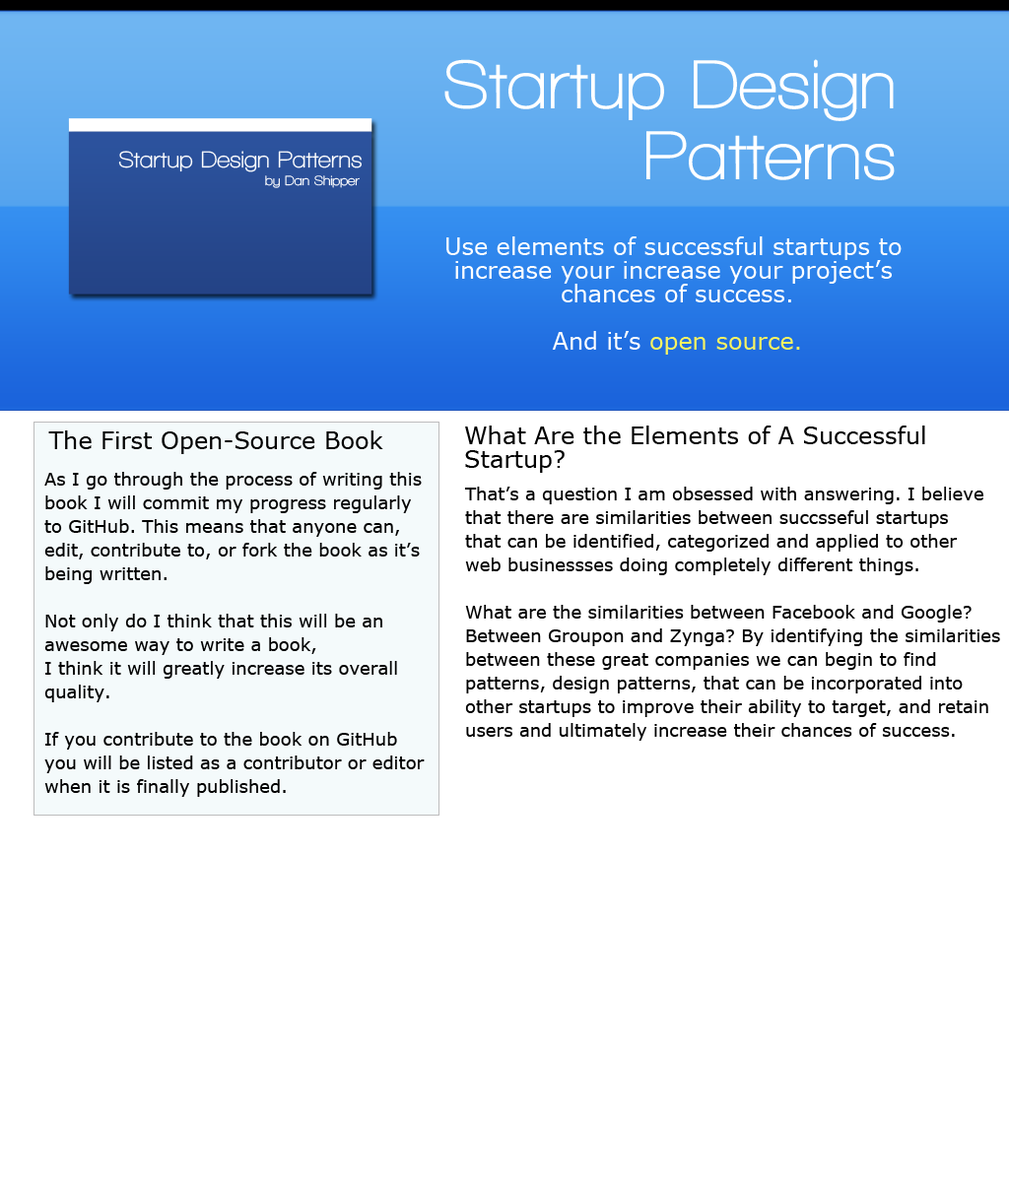
<style>
.page{position:relative;width:1009px;height:1182px;background:#ffffff}
.page>*{position:absolute;margin:0}
.t1{font:70.9px/23.6px "WalkwayBold";color:#ffffff}
.t2{font:23.6px "WalkwayBold";color:#ffffff}
.t3{font:13.8px "WalkwayBold";color:#ffffff}
.t4{font:23.6px/23.6px "Verdana";color:#ffffff}
.t5{font:23.6px/23.6px "Verdana";color:#f8f362}
.t6{font:23.6px/23.6px "Verdana";color:#000000}
.t7{font:23.6px "Verdana";color:#000000}
.t8{font:17.7px/23.6px "Verdana";color:#000000}
</style>
<div class="page">
<p class="t1" style="left:444px;top:59px;width:450px;height:121px;text-align:right">Startup Design<br><br><br>Patterns</p>
<p class="t2" style="left:118px;top:151px;width:244px;height:21px">Startup Design Patterns</p>
<p class="t3" style="left:265px;top:175px;width:95px;height:13px">by Dan Shipper</p>
<p class="t4" style="left:446px;top:236px;width:455px;height:119px;text-align:center">Use elements of successful startups to <br>increase your increase your project’s <br>chances of success.<br><br>And it’s <span class="t5">open source.</span></p>
<p class="t6" style="left:465px;top:426px;width:460px;height:47px">What Are the Elements of A Successful<br>Startup?</p>
<p class="t7" style="left:48px;top:430px;width:335px;height:24px">The First Open-Source Book</p>
<p class="t8" style="left:44px;top:472px;width:381px;height:325px">As I go through the process of writing this<br>book I will commit my progress regularly<br>to GitHub. This means that anyone can,<br>edit, contribute to, or fork the book as it’s<br>being written.<br><br>Not only do I think that this will be an <br>awesome way to write a book,<br>I think it will greatly increase its overall<br>quality.<br><br>If you contribute to the book on GitHub <br>you will be listed as a contributor or editor<br>when it is finally published.</p>
<p class="t8" style="left:464px;top:487px;width:536px;height:254px">That’s a question I am obsessed with answering. I believe<br>that there are similarities between succsseful startups<br>that can be identified, categorized and applied to other<br>web businessses doing completely different things.<br><br>What are the similarities between Facebook and Google?<br>Between Groupon and Zynga? By identifying the similarities<br>between these great companies we can begin to find<br>patterns, design patterns, that can be incorporated into<br>other startups to improve their ability to target, and retain<br>users and ultimately increase their chances of success.</p>
</div>
